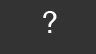
<style>
.page{position:relative;width:96px;height:54px;background:#333333}
.page>*{position:absolute;margin:0}
.t1{font:30px "Helvetica";color:#ffffff}
</style>
<div class="page">
<p class="t1" style="left:43px;top:11px;width:14px;height:22px">?</p>
</div>
